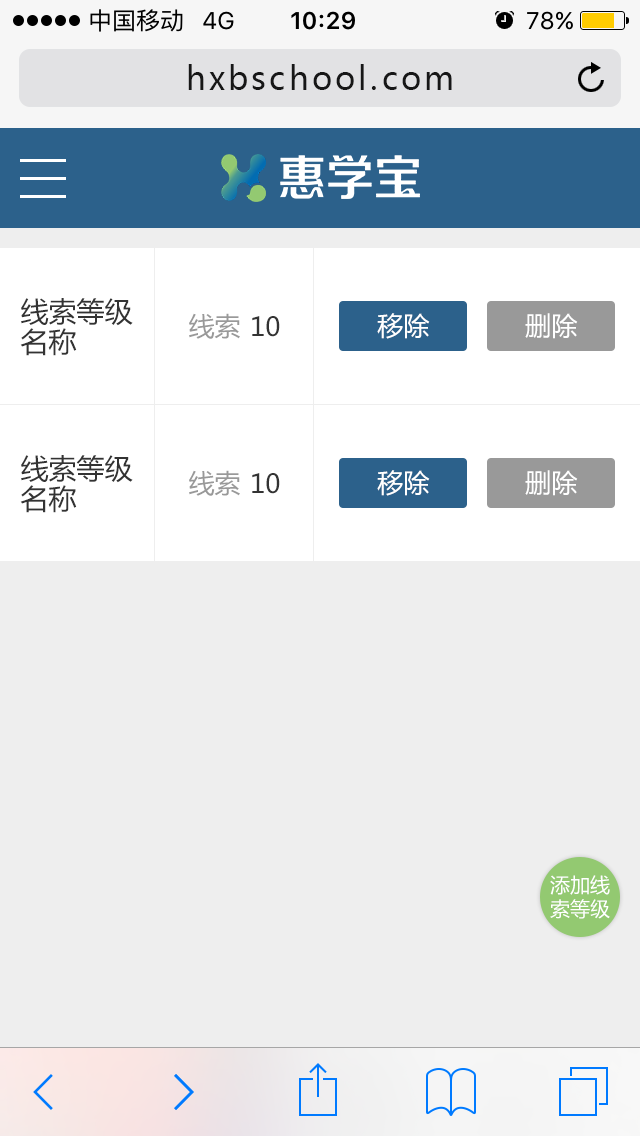
<style>
.page{position:relative;width:640px;height:1136px;background:#eeeeee}
.page>*{position:absolute;margin:0}
.t1{font:32px "MicrosoftYaHei";letter-spacing:0.1em;color:#171717}
.t2{font:28px/30px "MicrosoftYaHei";color:#333333}
.t3{font:26px "MicrosoftYaHei";color:#999999}
.t4{font:26px "MicrosoftYaHei";color:#333333}
.t5{font:26px "MicrosoftYaHei";color:#ffffff}
.t6{font:20px/24px "MicrosoftYaHei";color:#ffffff}
</style>
<div class="page">
<p class="t1" style="left:188px;top:64px;width:264px;height:26px">hxbschool.com</p>
<p class="t2" style="left:20px;top:298px;width:113px;height:58px">线索等级<br>名称</p>
<p class="t3" style="left:189px;top:313px;width:51px;height:26px">线索</p>
<p class="t4" style="left:252px;top:316px;width:28px;height:21px">10</p>
<p class="t5" style="left:377px;top:313px;width:53px;height:26px">移除</p>
<p class="t5" style="left:525px;top:313px;width:53px;height:26px">删除</p>
<p class="t2" style="left:20px;top:455px;width:113px;height:58px">线索等级<br>名称</p>
<p class="t3" style="left:189px;top:470px;width:51px;height:26px">线索</p>
<p class="t4" style="left:252px;top:473px;width:28px;height:21px">10</p>
<p class="t5" style="left:377px;top:470px;width:53px;height:26px">移除</p>
<p class="t5" style="left:525px;top:470px;width:53px;height:26px">删除</p>
<p class="t6" style="left:550px;top:875px;width:60px;height:44px;text-align:center">添加线<br>索等级</p>
</div>
